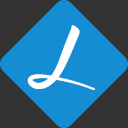
<style>
.page{position:relative;width:128px;height:128px;background:#148dd4}
.page>*{position:absolute;margin:0}
.t1{font:132.5px "WolfintheCityLight";color:#ffffff}
</style>
<div class="page">
<p class="t1" style="left:27px;top:25px;width:68px;height:65px">L</p>
</div>
